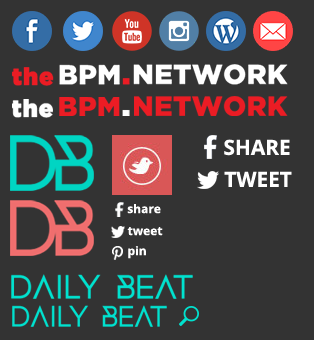
<style>
.page{position:relative;width:314px;height:340px;background:#333333}
.page>*{position:absolute;margin:0}
.t1{font:23.8px "GothamBlack";letter-spacing:0.015em;color:#ffffff;font-weight:bold}
.t2{font:27.8px "GothamBlack";letter-spacing:0.015em;color:#eb1c24;text-transform:uppercase}
.t3{font:31.7px "GothamBlack";letter-spacing:0.015em;color:#ffffff;text-transform:uppercase}
.t4{font:20.8px "OpenSans-Bold";color:#ffffff}
.t5{font:12px "OpenSans-Bold";color:#ffffff}
</style>
<div class="page">
<p class="t1" style="left:12px;top:99px;width:41px;height:19px">the</p>
<p class="t2" style="left:59px;top:97px;width:71px;height:19px">BPM<span class="t3">.</span></p>
<p class="t2" style="left:134px;top:96px;width:154px;height:20px">Network</p>
<p class="t4" style="left:224px;top:139px;width:66px;height:17px">SHARE</p>
<p class="t4" style="left:224px;top:171px;width:68px;height:16px">TWEET</p>
<p class="t5" style="left:127px;top:204px;width:34px;height:10px">share</p>
<p class="t5" style="left:127px;top:227px;width:36px;height:9px">tweet</p>
<p class="t5" style="left:128px;top:246px;width:18px;height:13px">pin</p>
</div>
